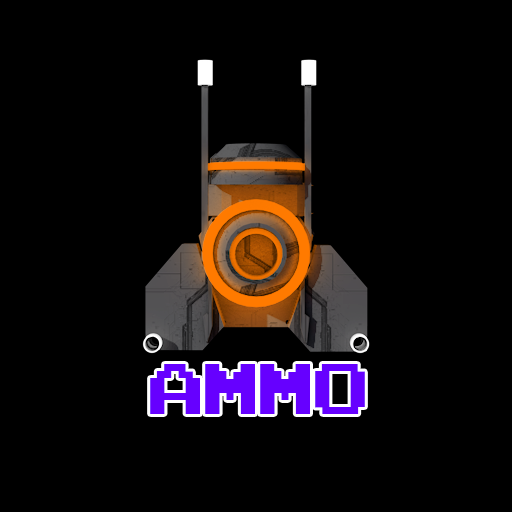
<style>
.page{position:relative;width:512px;height:512px;background:#000000}
.page>*{position:absolute;margin:0}
.t1{font:100px "ArcadeClassic";color:#6600ff}
</style>
<div class="page">
<p class="t1" style="left:150px;top:364px;width:215px;height:50px">Ammo</p>
</div>
